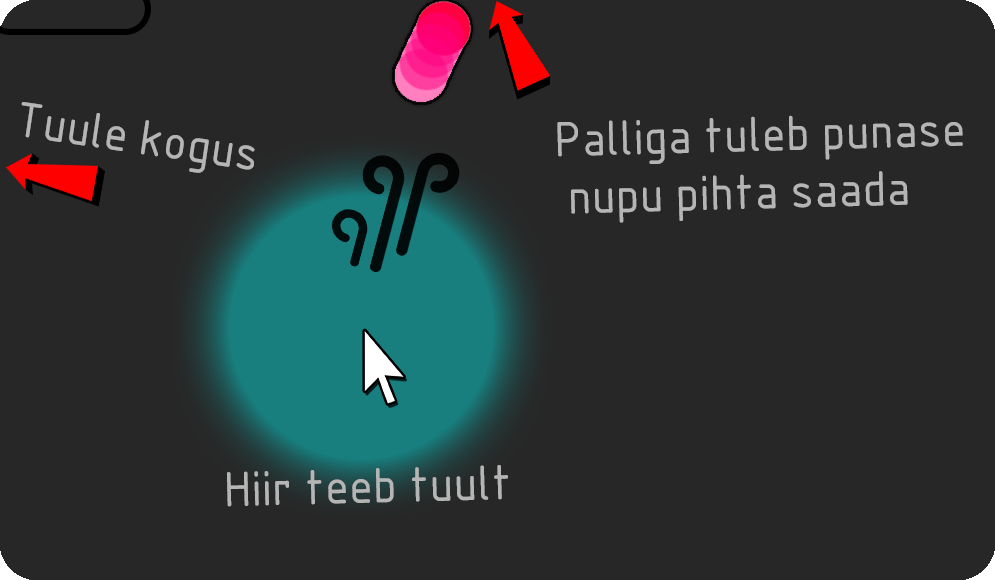
<style>
.page{position:relative;width:995px;height:580px;background:#272727}
.page>*{position:absolute;margin:0}
.t1{font:48px "GOST-Common";color:#b5b5b5}
</style>
<div class="page">
<p class="t1" style="left:21px;top:102px;width:234px;height:71px;rotate:8deg">Tuule kogus</p>
<p class="t1" style="left:557px;top:115px;width:406px;height:108px;rotate:-2deg">Palliga tuleb punase<br> nupu pihta saada</p>
<p class="t1" style="left:227px;top:465px;width:281px;height:42px;rotate:-1deg">Hiir teeb tuult</p>
</div>
